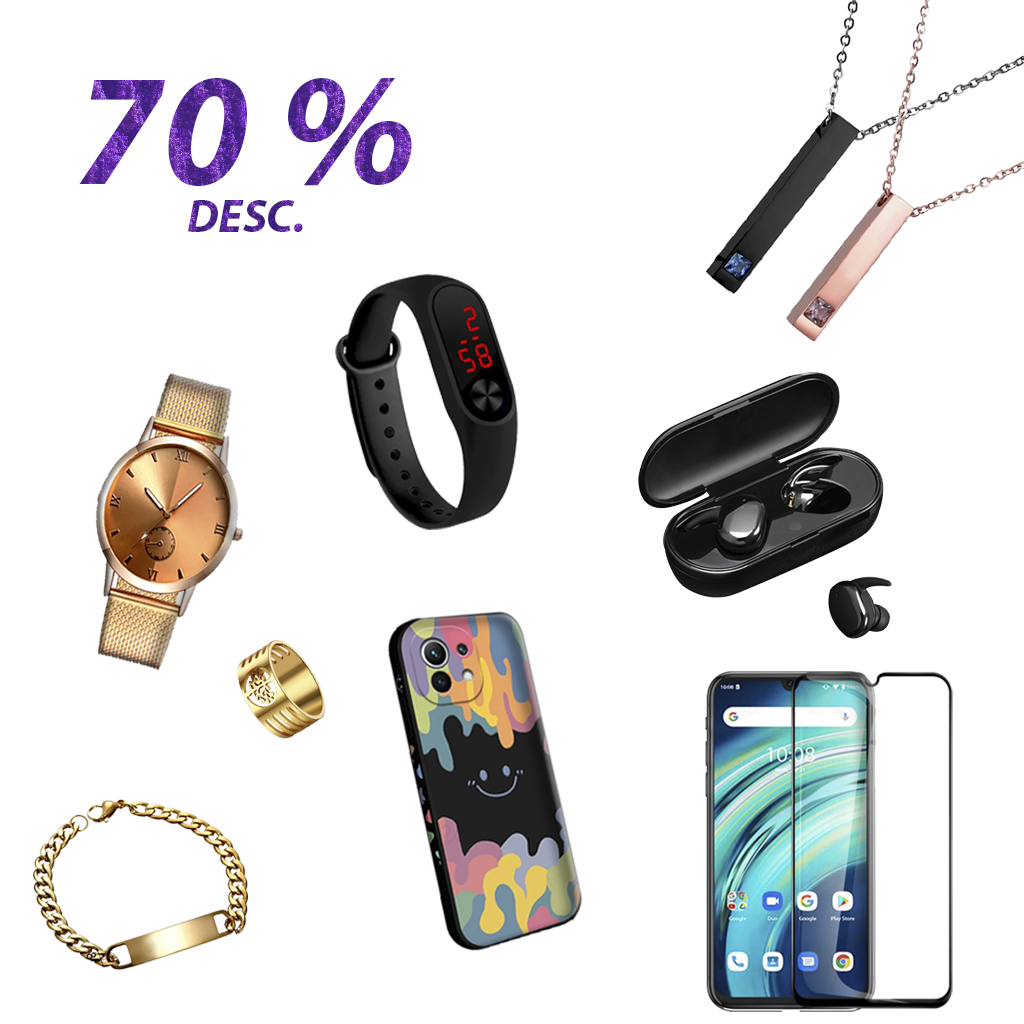
<style>
.page{position:relative;width:1024px;height:1024px;background:#ffffff}
.page>*{position:absolute;margin:0}
.t1{font:46.7px/48px "MyriadPro-BoldIt"}
.t2{font:160px/48px "MyriadPro-BoldIt"}
</style>
<div class="page">
<p class="t1" style="left:79px;top:78px;width:333px;height:154px;text-align:center"><span class="t2">70 % <br></span>DESC.</p>
</div>
